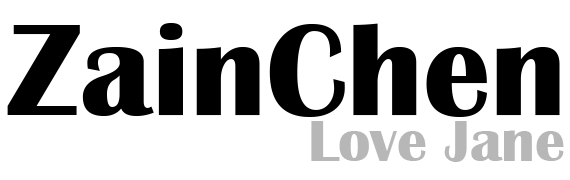
<style>
.page{position:relative;width:570px;height:180px;background:#ffffff}
.page>*{position:absolute;margin:0}
.t1{font:135px "BritannicBold";color:#000000}
.t2{font:60px "BritannicBold";color:#b7b7b7}
</style>
<div class="page">
<p class="t1" style="left:7px;top:23px;width:553px;height:94px">ZainChen</p>
<p class="t2" style="left:311px;top:121px;width:253px;height:41px">Love Jane</p>
</div>
